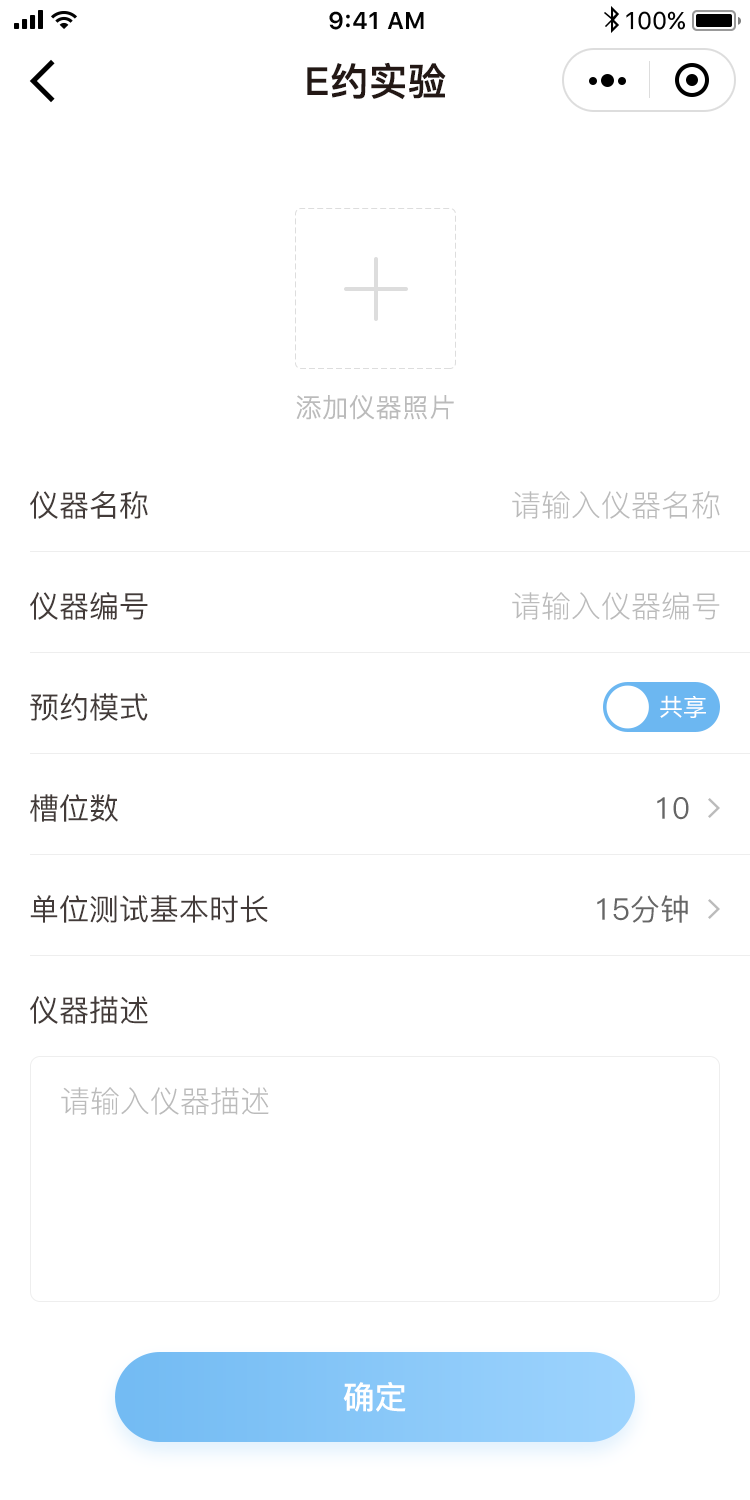
<style>
.page{position:relative;width:750px;height:1500px;background:#ffffff}
.page>*{position:absolute;margin:0}
.t1{font:38px "PingFang-SC-Bold";color:#231815;font-weight:bold}
.t2{font:26px "PingFang-SC-Regular";color:#bbbbbb;font-weight:bold}
.t3{font:30px "PingFang-SC-Medium";color:#433b39}
.t4{font:30px "PingFang-SC-Regular";color:#bbbbbb}
.t5{font:24px "PingFang-SC-Medium";color:#ffffff}
.t6{font:30px "PingFang-SC-Medium";color:#666666}
.t7{font:32px "PingFang-SC-Bold";color:#ffffff}
</style>
<div class="page">
<p class="t1" style="left:307px;top:62px;width:139px;height:38px">E约实验</p>
<p class="t2" style="left:296px;top:395px;width:158px;height:25px">添加仪器照片</p>
<p class="t3" style="left:30px;top:491px;width:118px;height:28px">仪器名称</p>
<p class="t4" style="left:512px;top:491px;width:208px;height:28px">请输入仪器名称</p>
<p class="t3" style="left:30px;top:592px;width:118px;height:28px">仪器编号</p>
<p class="t4" style="left:512px;top:592px;width:208px;height:28px">请输入仪器编号</p>
<p class="t3" style="left:30px;top:693px;width:118px;height:28px">预约模式</p>
<p class="t5" style="left:660px;top:695px;width:46px;height:23px">共享</p>
<p class="t3" style="left:30px;top:794px;width:88px;height:28px">槽位数</p>
<p class="t6" style="left:657px;top:797px;width:32px;height:23px">10</p>
<p class="t3" style="left:30px;top:895px;width:238px;height:28px">单位测试基本时长</p>
<p class="t6" style="left:597px;top:895px;width:91px;height:28px">15分钟</p>
<p class="t3" style="left:30px;top:996px;width:118px;height:28px">仪器描述</p>
<p class="t4" style="left:61px;top:1087px;width:208px;height:28px">请输入仪器描述</p>
<p class="t7" style="left:343px;top:1382px;width:63px;height:30px">确定</p>
</div>
